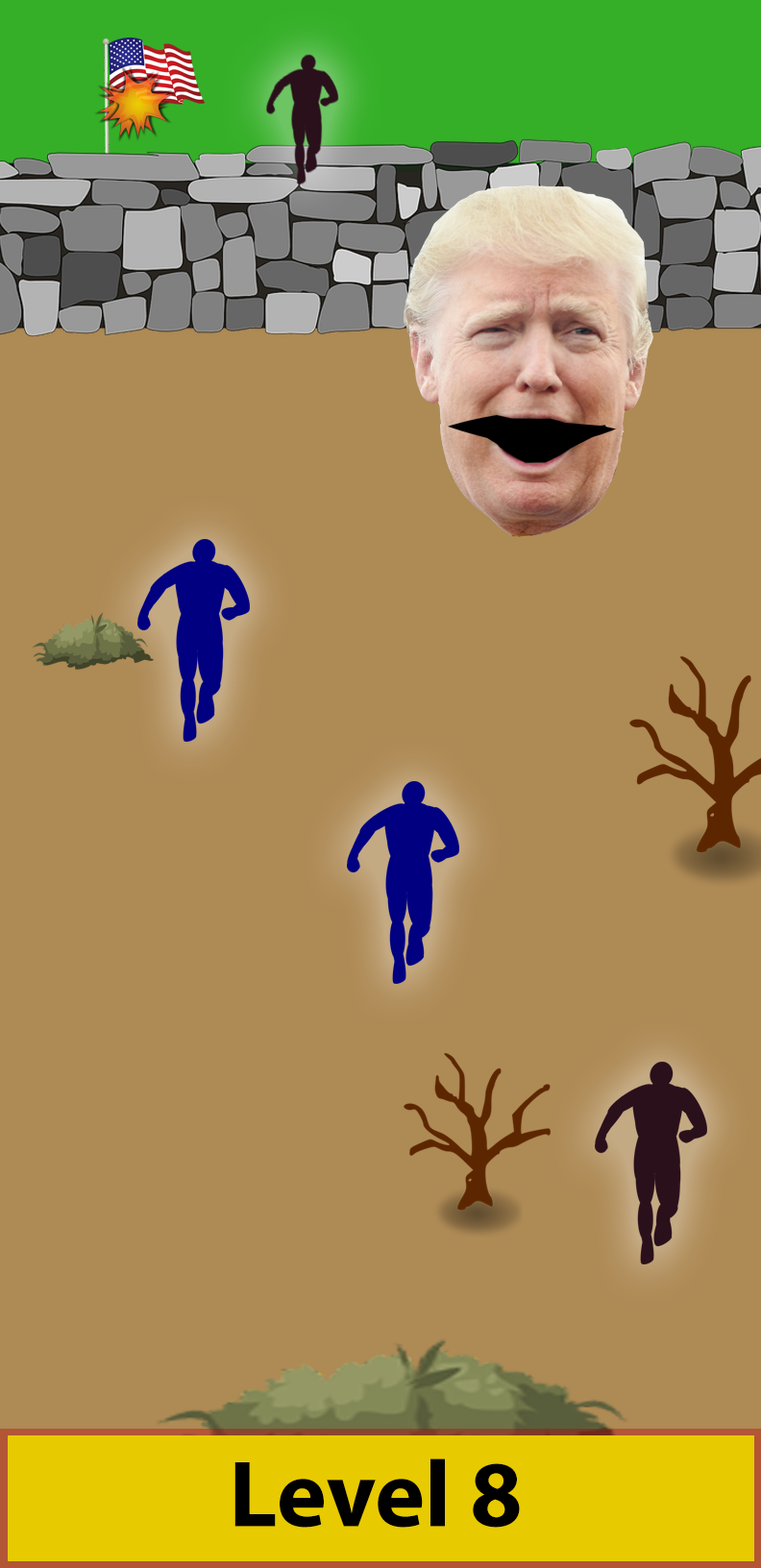
<style>
.page{position:relative;width:761px;height:1568px;background:#ae8a55}
.page>*{position:absolute;margin:0}
.t1{font:22.7px/45.5px "MyriadPro-Bold";color:#000000}
</style>
<div class="page">
<p class="t1" style="left:234px;top:1458px;width:286px;height:69px;text-align:center">Level 8</p>
</div>
